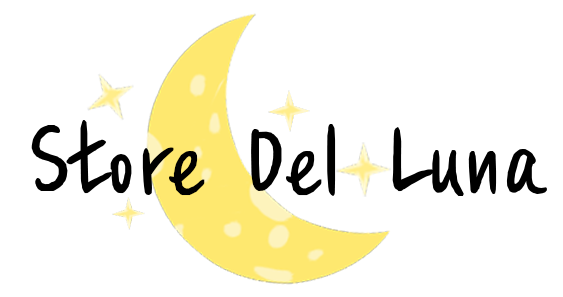
<style>
.page{position:relative;width:563px;height:297px;background:#ffffff}
.page>*{position:absolute;margin:0}
.t1{font:132.3px "Cafe24Shiningstar";color:#000000}
</style>
<div class="page">
<p class="t1" style="left:31px;top:120px;width:516px;height:76px">Store Del Luna</p>
</div>
